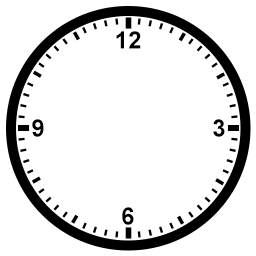
<style>
.page{position:relative;width:256px;height:256px;background:#ffffff}
.page>*{position:absolute;margin:0}
.t1{font:24px "Arial-BoldMT";color:#000000}
</style>
<div class="page">
<p class="t1" style="left:116px;top:31px;width:25px;height:18px">12</p>
<p class="t1" style="left:32px;top:119px;width:12px;height:18px">9</p>
<p class="t1" style="left:213px;top:119px;width:12px;height:18px">3</p>
<p class="t1" style="left:122px;top:207px;width:12px;height:18px">6</p>
</div>
